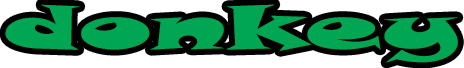
<style>
.page{position:relative;width:464px;height:68px;background:#00a651}
.page>*{position:absolute;margin:0}
.t1{font:60px "SnapITC-Regular";color:#00a651;scale:2 1}
</style>
<div class="page">
<p class="t1" style="left:5px;top:4px;width:453px;height:59px">donkey</p>
</div>
